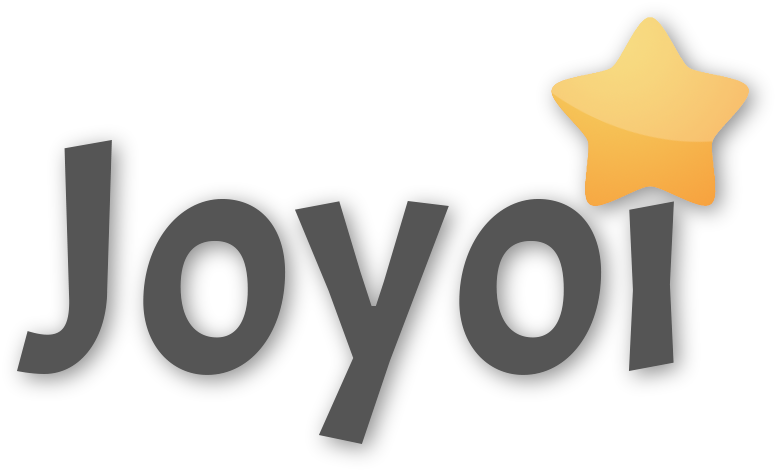
<style>
.page{position:relative;width:777px;height:472px;background:#ffffff}
.page>*{position:absolute;margin:0}
.t1{font:332.8px "Acme-Regular";color:#555555}
</style>
<div class="page">
<p class="t1" style="left:17px;top:124px;width:662px;height:320px">Joyoi</p>
</div>
